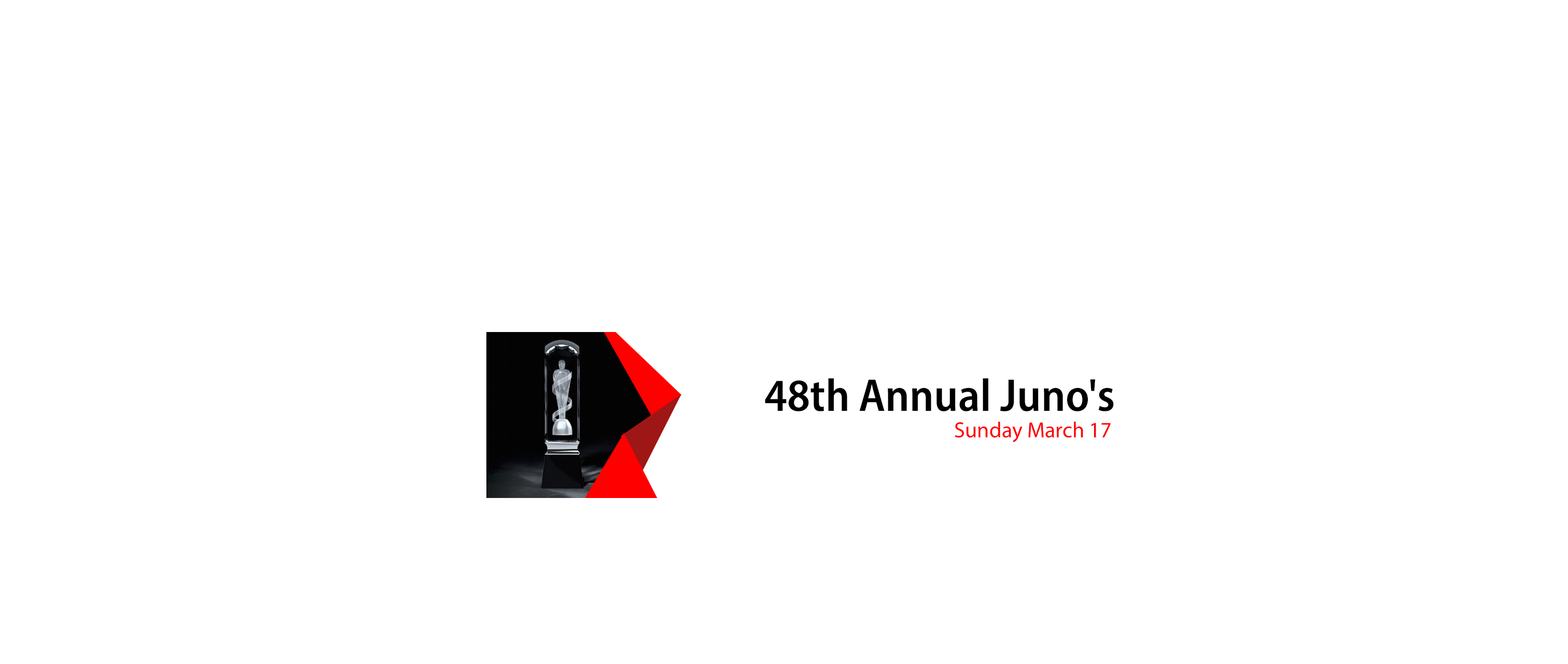
<style>
.page{position:relative;width:1568px;height:664px;background:#ffffff}
.page>*{position:absolute;margin:0}
.t1{font:46.1px "MyriadConceptRoman-SemiboldSemiCondensed";color:#010000}
.t2{font:22px "MyriadConceptRoman-Regular";color:#ff0000}
</style>
<div class="page">
<p class="t1" style="left:765px;top:378px;width:349px;height:33px">48th Annual Juno's</p>
<p class="t2" style="left:955px;top:421px;width:156px;height:21px">Sunday March 17</p>
</div>
